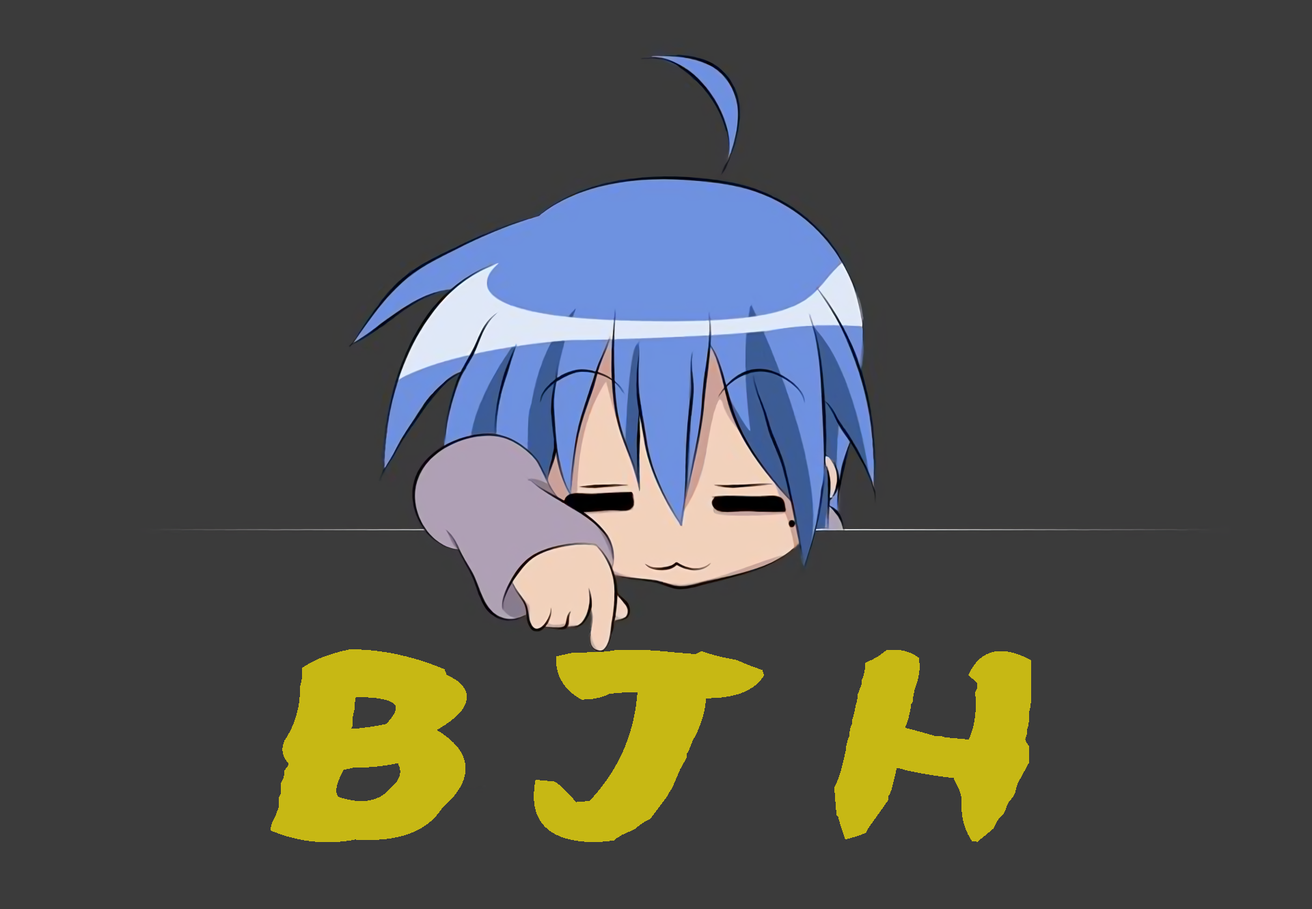
<style>
.page{position:relative;width:1312px;height:909px;background:#3b3b3b}
.page>*{position:absolute;margin:0}
.t1{font:205px "Ninja-Naruto";letter-spacing:0.2em;color:#c7b814;font-weight:bold;scale:1.5 1}
</style>
<div class="page">
<p class="t1" style="left:271px;top:649px;width:760px;height:193px">BJH</p>
</div>
